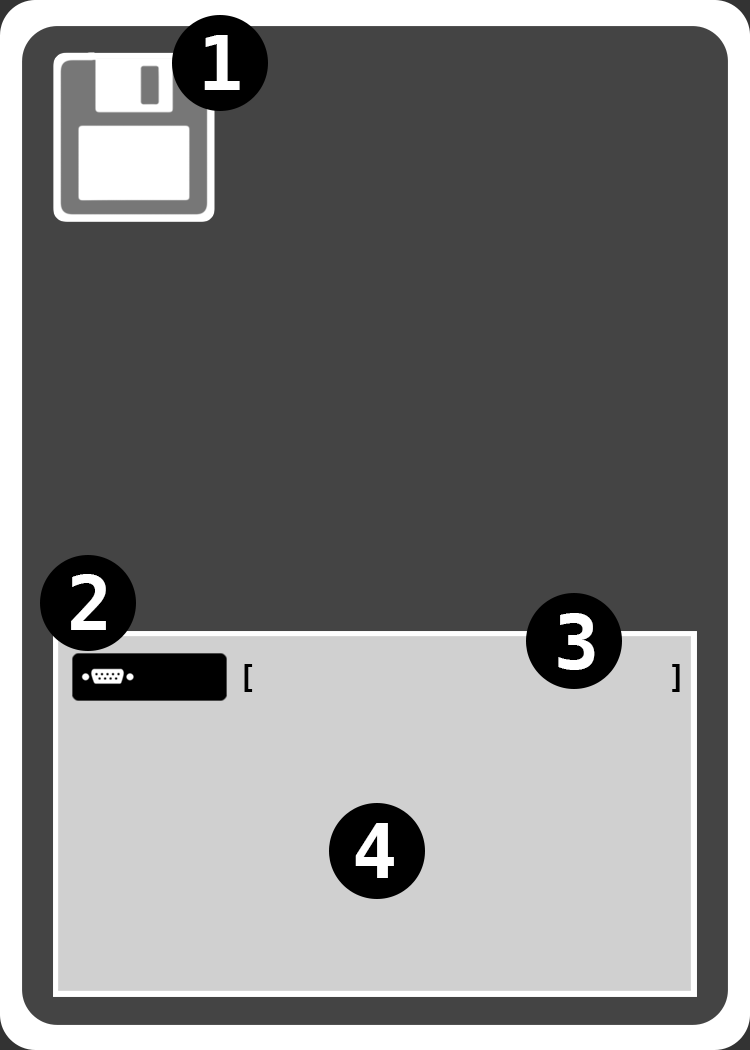
<style>
.page{position:relative;width:750px;height:1050px;background:#444444}
.page>*{position:absolute;margin:0}
.t1{font:75px "DejaVuSansMono-Bold";color:#ffffff}
</style>
<div class="page">
<p class="t1" style="left:204px;top:35px;width:36px;height:55px">1</p>
<p class="t1" style="left:71px;top:574px;width:35px;height:56px">2</p>
<p class="t1" style="left:558px;top:613px;width:37px;height:57px">3</p>
<p class="t1" style="left:355px;top:823px;width:39px;height:55px">4</p>
</div>
